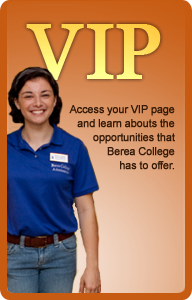
<style>
.page{position:relative;width:192px;height:300px}
.page>*{position:absolute;margin:0}
.t1{font:78px "Georgia";letter-spacing:0.02em;font-weight:bold}
.t2{font:78px "Georgia";letter-spacing:-0.04em;font-weight:bold}
.t3{font:78px "Georgia";letter-spacing:-0.06em;font-weight:bold}
.t4{font:11px/14px "ArialMT";letter-spacing:-0.04em;color:#341a08;font-weight:bold}
</style>
<div class="page">
<p class="t1" style="left:26px;top:24px;width:135px;height:56px">V<span class="t2">I</span><span class="t3">P</span></p>
<p class="t4" style="left:69px;top:105px;width:106px;height:65px;text-align:right">Access your VIP page<br>and learn abouts the opportunities that<br>Berea College<br>has to offer.</p>
</div>
